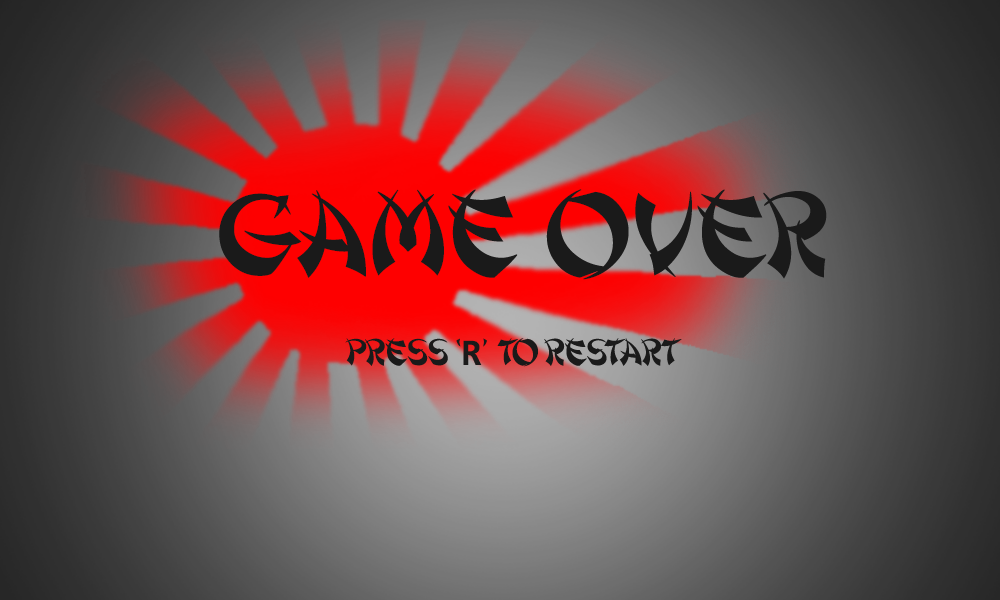
<style>
.page{position:relative;width:1000px;height:600px}
.page>*{position:absolute;margin:0}
.t1{font:121.4px "Shanghai";color:#1a1a1a}
.t2{font:37.9px "Shanghai";color:#1a1a1a}
.t3{font:37.9px "Consolas-Bold";color:#1a1a1a}
</style>
<div class="page">
<p class="t1" style="left:219px;top:189px;width:608px;height:91px">Game Over</p>
<p class="t2" style="left:345px;top:338px;width:337px;height:29px">pRESS ‘<span class="t3">R</span>’ TO RESTART</p>
</div>
